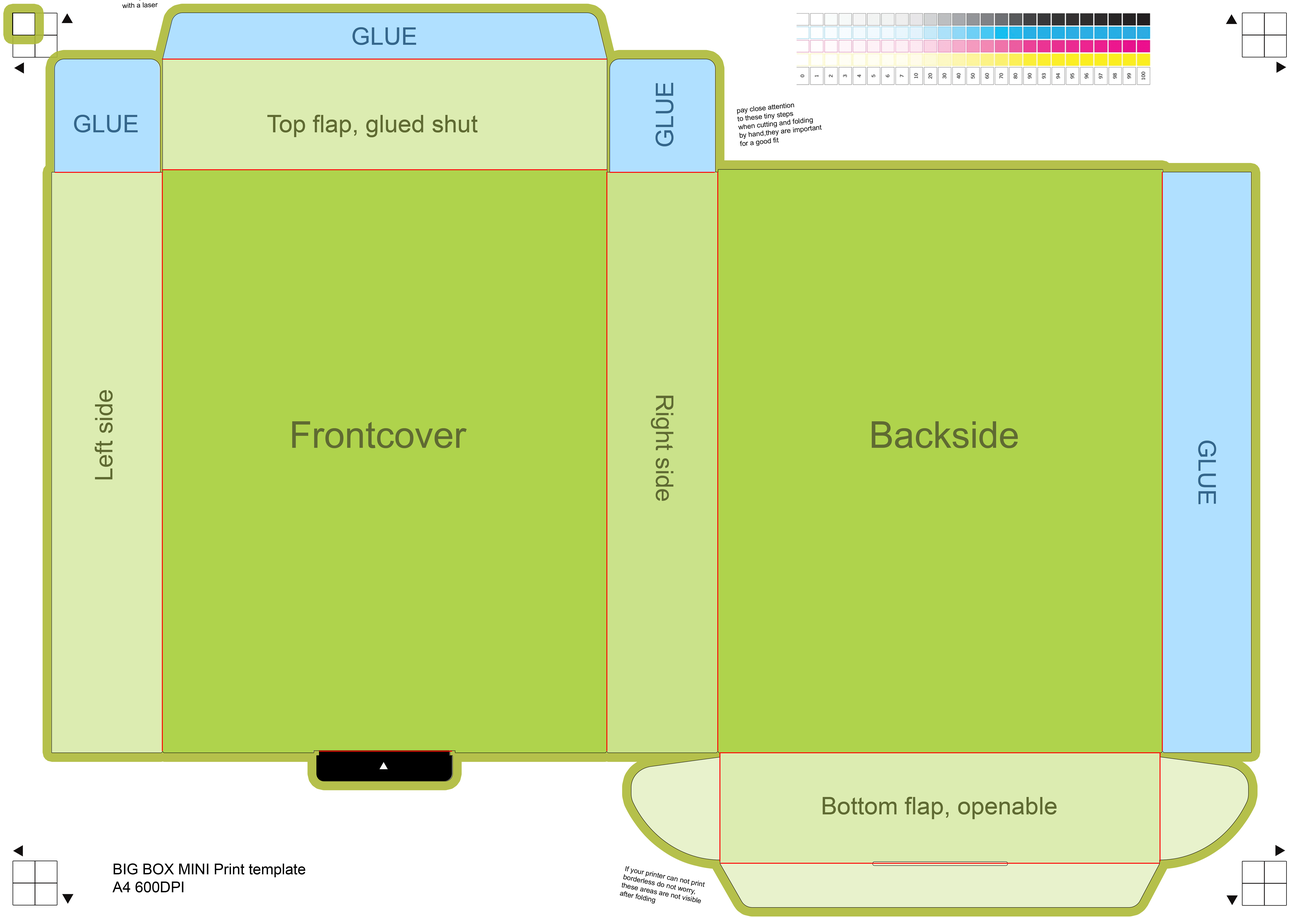
<style>
.page{position:relative;width:1299px;height:918px;background:#afd34c}
.page>*{position:absolute;margin:0}
.t1{font:24.3px "ArialMT";color:#34668b}
.t2{font:7px "ArialMT";color:#000000}
.t3{font:24.3px "ArialMT";color:#5f6a32}
.t4{font:37px "ArialMT";color:#5f6a32}
.t5{font:14.9px "ArialMT";color:#000000}
</style>
<div class="page">
<p class="t1" style="left:352px;top:27px;width:64px;height:18px">GLUE</p>
<p class="t1" style="left:655px;top:83px;width:18px;height:63px;rotate:-90deg">GLUE</p>
<p class="t2" style="left:737px;top:103px;width:85px;height:43px;rotate:-6deg">pay close attention<br>to these tiny steps<br>when cutting and folding<br>by hand,they are important<br>for a good fit</p>
<p class="t1" style="left:74px;top:115px;width:64px;height:18px">GLUE</p>
<p class="t3" style="left:267px;top:115px;width:211px;height:22px">Top flap, glued shut</p>
<p class="t3" style="left:95px;top:390px;width:18px;height:90px;rotate:-90deg">Left side</p>
<p class="t3" style="left:651px;top:396px;width:22px;height:105px;rotate:90deg">Right side</p>
<p class="t4" style="left:292px;top:421px;width:175px;height:27px">Frontcover</p>
<p class="t4" style="left:871px;top:421px;width:146px;height:27px">Backside</p>
<p class="t1" style="left:1198px;top:441px;width:18px;height:63px;rotate:90deg">GLUE</p>
<p class="t3" style="left:822px;top:797px;width:234px;height:22px">Bottom flap, openable</p>
<p class="t5" style="left:112px;top:864px;width:193px;height:29px">BIG BOX MINI Print template<br>A4 600DPI</p>
<p class="t2" style="left:620px;top:866px;width:85px;height:38px;rotate:12deg">If your printer can not print<br>borderless do not worry,<br>these areas are not visible<br>after folding</p>
</div>
